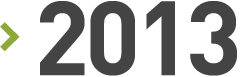
<style>
.page{position:relative;width:245px;height:77px;background:#ffffff}
.page>*{position:absolute;margin:0}
.t1{font:103px "Dinbol";letter-spacing:-0.05em;color:#444444}
</style>
<div class="page">
<p class="t1" style="left:40px;top:1px;width:197px;height:75px">2013</p>
</div>
